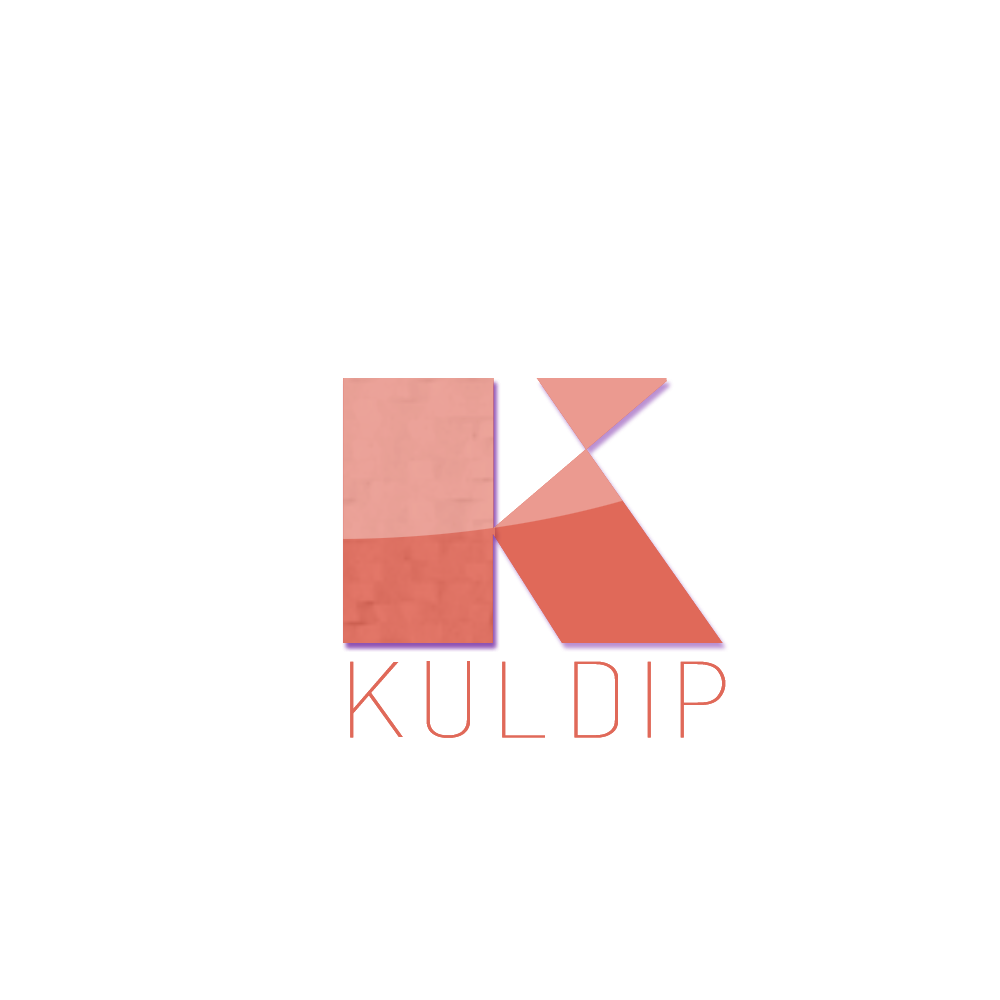
<style>
.page{position:relative;width:1000px;height:1000px;background:#ffffff}
.page>*{position:absolute;margin:0}
.t1{font:344px "Braggadocio"}
.t2{font:104px "basictitlefont";color:#e06959;scale:1.42 1}
</style>
<div class="page">
<p class="t1" style="left:343px;top:378px;width:380px;height:265px">K</p>
<p class="t2" style="left:350px;top:661px;width:376px;height:77px">KULDIP</p>
</div>
